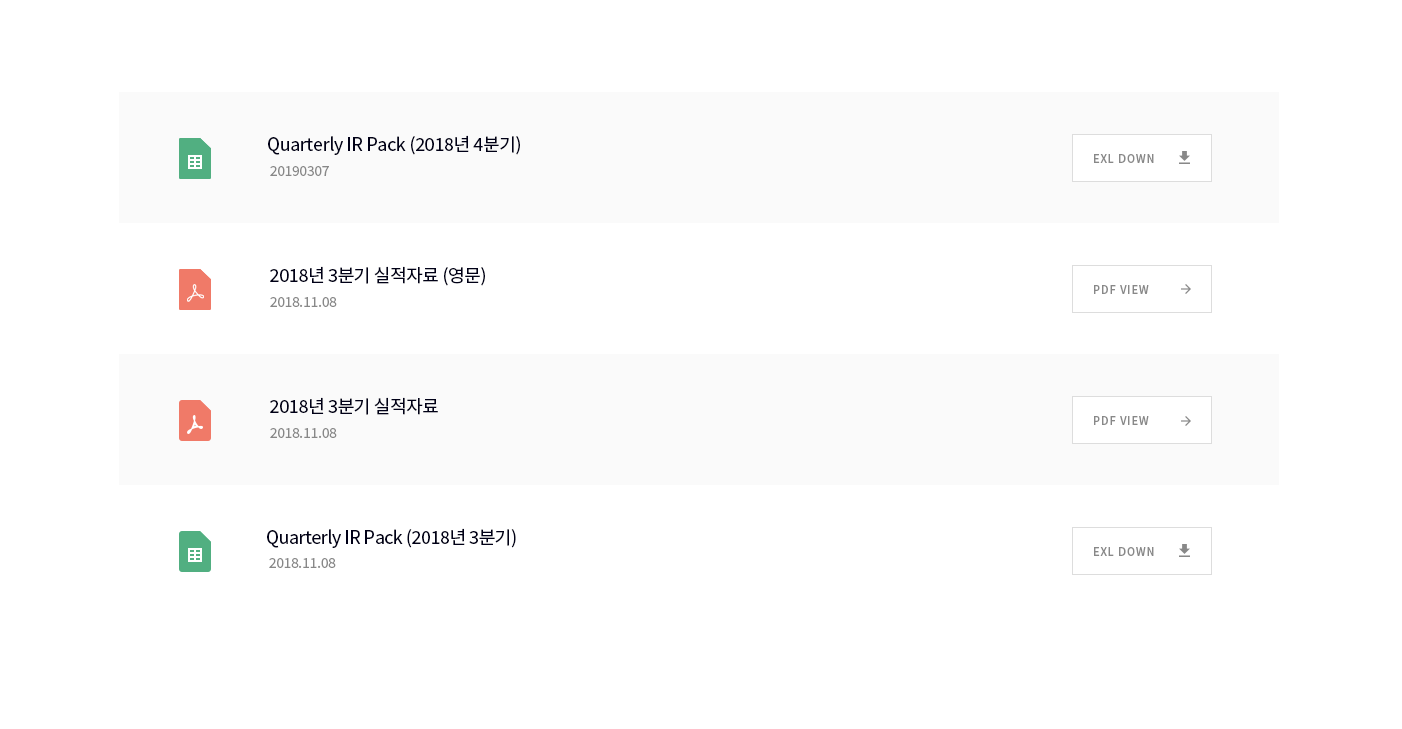
<style>
.page{position:relative;width:1402px;height:729px;background:#ffffff}
.page>*{position:absolute;margin:0}
.t1{font:18px "NotoSansKR-Regular";letter-spacing:-0.02em;color:#000017}
.t2{font:11px/131px "NotoSansKR-Medium";letter-spacing:0.08em;color:#888888}
.t3{font:14px "NotoSansKR-Regular";letter-spacing:-0.02em;color:#888888}
.t4{font:18px "NotoSansKR-Regular";letter-spacing:-0.027em;color:#000017}
</style>
<div class="page">
<p class="t1" style="left:268px;top:135px;width:252px;height:20px">Quarterly IR Pack (2018년 4분기)</p>
<p class="t2" style="left:1094px;top:154px;width:60px;height:402px">EXL DOWN<br>PDF VIEW<br>PDF VIEW<br>EXL DOWN</p>
<p class="t3" style="left:270px;top:166px;width:59px;height:10px">20190307</p>
<p class="t1" style="left:270px;top:266px;width:215px;height:20px">2018년 3분기 실적자료 (영문)</p>
<p class="t3" style="left:270px;top:297px;width:67px;height:10px">2018.11.08</p>
<p class="t1" style="left:270px;top:397px;width:168px;height:18px">2018년 3분기 실적자료</p>
<p class="t3" style="left:270px;top:428px;width:67px;height:10px">2018.11.08</p>
<p class="t4" style="left:267px;top:528px;width:249px;height:20px">Quarterly IR Pack (2018년 3분기)</p>
<p class="t3" style="left:269px;top:558px;width:67px;height:10px">2018.11.08</p>
</div>
